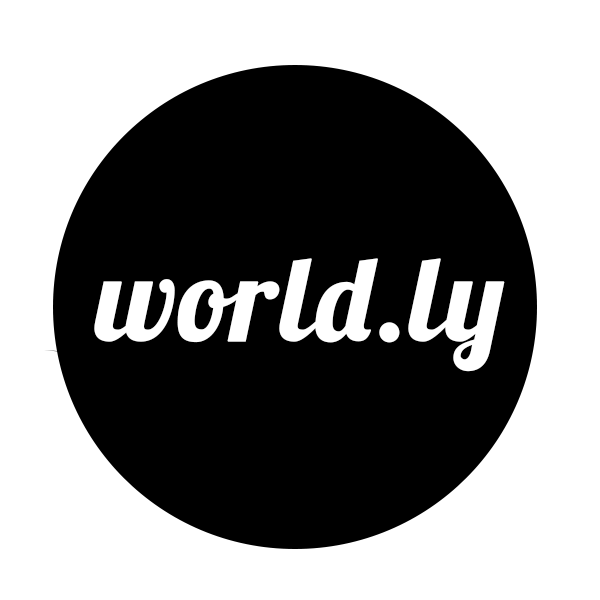
<style>
.page{position:relative;width:600px;height:600px;background:#ffffff}
.page>*{position:absolute;margin:0}
.t1{font:117.7px "Lobster1.3";color:#ffffff;font-weight:bold}
</style>
<div class="page">
<p class="t1" style="left:94px;top:258px;width:411px;height:114px">world.ly</p>
</div>
